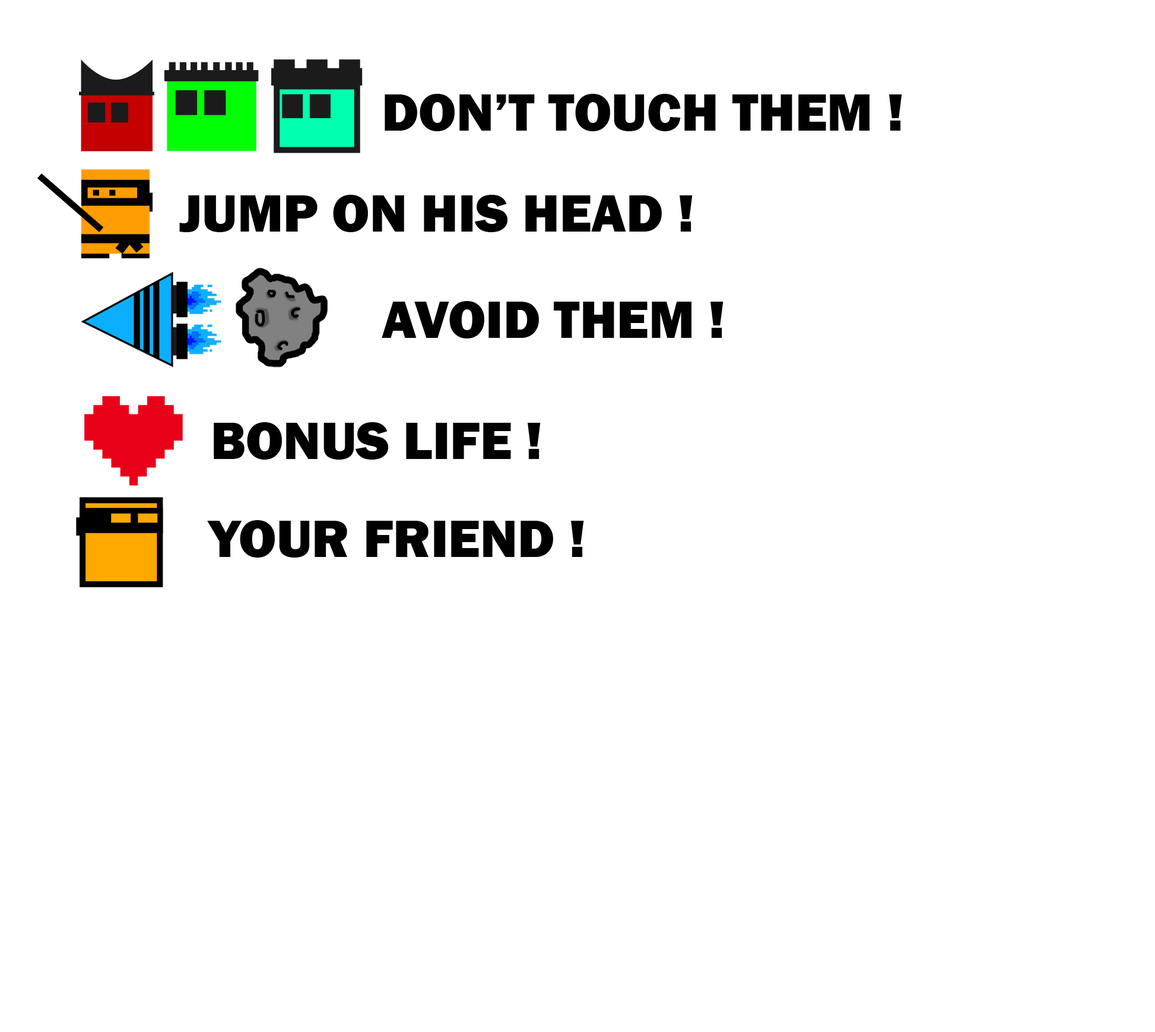
<style>
.page{position:relative;width:1155px;height:1032px;background:#ffffff}
.page>*{position:absolute;margin:0}
.t1{font:54.6px "FranklinGothic-Heavy";color:#000000}
</style>
<div class="page">
<p class="t1" style="left:385px;top:94px;width:518px;height:37px">DON’T TOUCH THEM !</p>
<p class="t1" style="left:179px;top:195px;width:514px;height:37px">JUMP ON HIS HEAD !</p>
<p class="t1" style="left:382px;top:301px;width:342px;height:37px">AVOID THEM !</p>
<p class="t1" style="left:214px;top:422px;width:327px;height:38px">BONUS LIFE !</p>
<p class="t1" style="left:207px;top:520px;width:377px;height:38px">YOUR FRIEND !</p>
</div>
